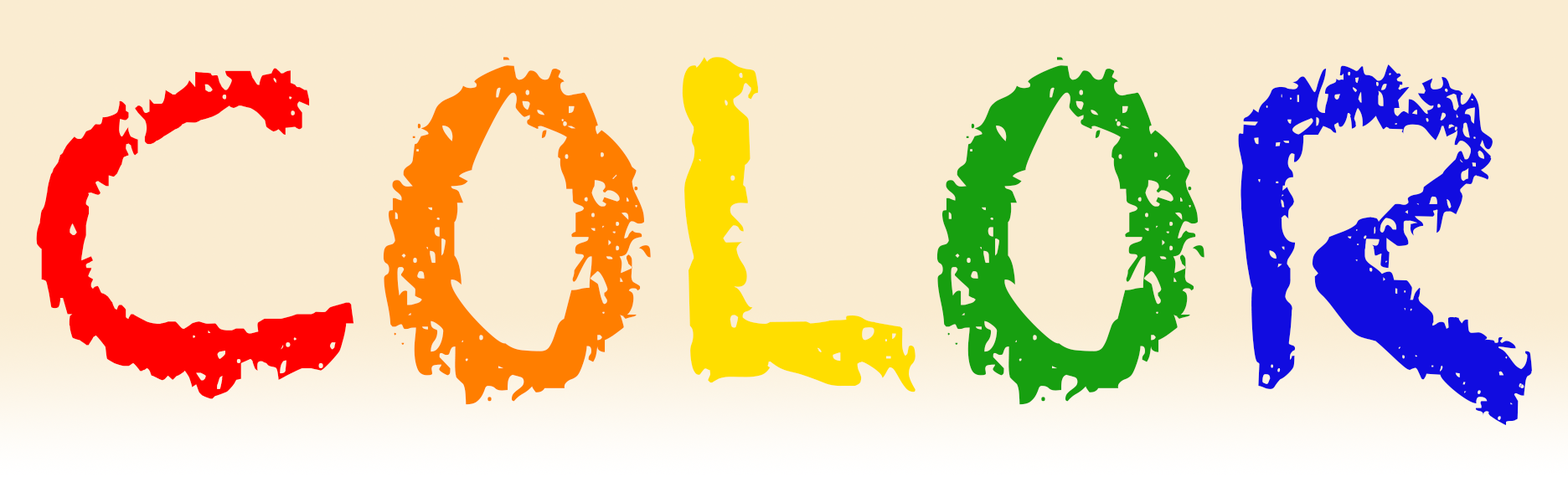
<style>
.page{position:relative;width:1568px;height:482px;background:#faecd1}
.page>*{position:absolute;margin:0}
.t1{font:418.8px "Chalkduster";color:#ff0000}
.t2{font:418.8px "Chalkduster";color:#ff7e00}
.t3{font:418.8px "Chalkduster";color:#ffde00}
.t4{font:418.8px "Chalkduster";color:#179f10}
.t5{font:418.8px "Chalkduster";color:#110ce0}
</style>
<div class="page">
<p class="t1" style="left:36px;top:57px;width:1496px;height:369px">C<span class="t2">O</span><span class="t3">L</span><span class="t4">O</span><span class="t5">R</span></p>
</div>
